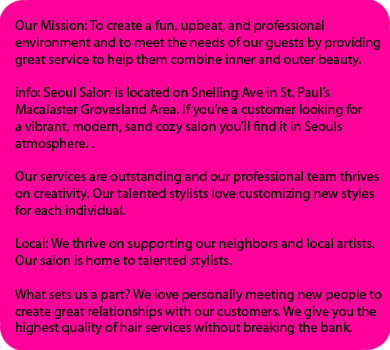
<style>
.page{position:relative;width:390px;height:350px;background:#ff0099}
.page>*{position:absolute;margin:0}
.t1{font:14px "MyriadPro-Regular";color:#000000}
</style>
<div class="page">
<p class="t1" style="left:15px;top:20px;width:367px;height:315px">Our Mission: To create a fun, upbeat, and professional<br>environment and to meet the needs of our guests by providing<br>great service to help them combine inner and outer beauty.<br><br>info: Seoul Salon is located on Snelling Ave in St. Paul’s<br>Macalaster Grovesland Area. If you’re a customer looking for<br>a vibrant, modern, sand cozy salon you’ll find it in Seouls<br>atmosphere. . <br><br>Our services are outstanding and our professional team thrives<br>on creativity. Our talented stylists love customizing new styles<br>for each individual.<br><br>Local: We thrive on supporting our neighbors and local artists.<br>Our salon is home to talented stylists.<br><br>What sets us a part? We love personally meeting new people to <br>create great relationships with our customers. We give you the<br>highest quality of hair services without breaking the bank.</p>
</div>
